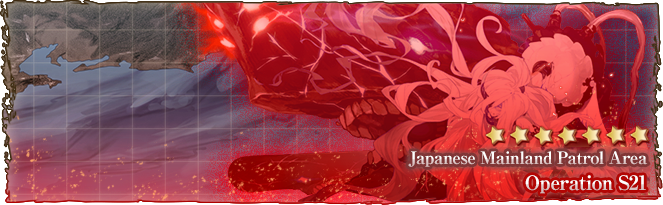
<style>
.page{position:relative;width:663px;height:205px}
.page>*{position:absolute;margin:0}
.t1{font:17px "RyuminPro-ExBold";letter-spacing:-0.04em}
.t2{font:20px "RyuminPro-ExBold";letter-spacing:-0.04em}
</style>
<div class="page">
<p class="t1" style="left:408px;top:151px;width:240px;height:16px">Japanese Mainland Patrol Area</p>
<p class="t2" style="left:525px;top:175px;width:121px;height:19px">Operation S21</p>
</div>
